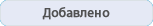
<style>
.page{position:relative;width:153px;height:26px;background:#e5e9f5}
.page>*{position:absolute;margin:0}
.t1{font:13.3px "MyriadPro-Regular";color:#515151;font-weight:bold}
</style>
<div class="page">
<p class="t1" style="left:42px;top:7px;width:68px;height:13px">Добавлено</p>
</div>
